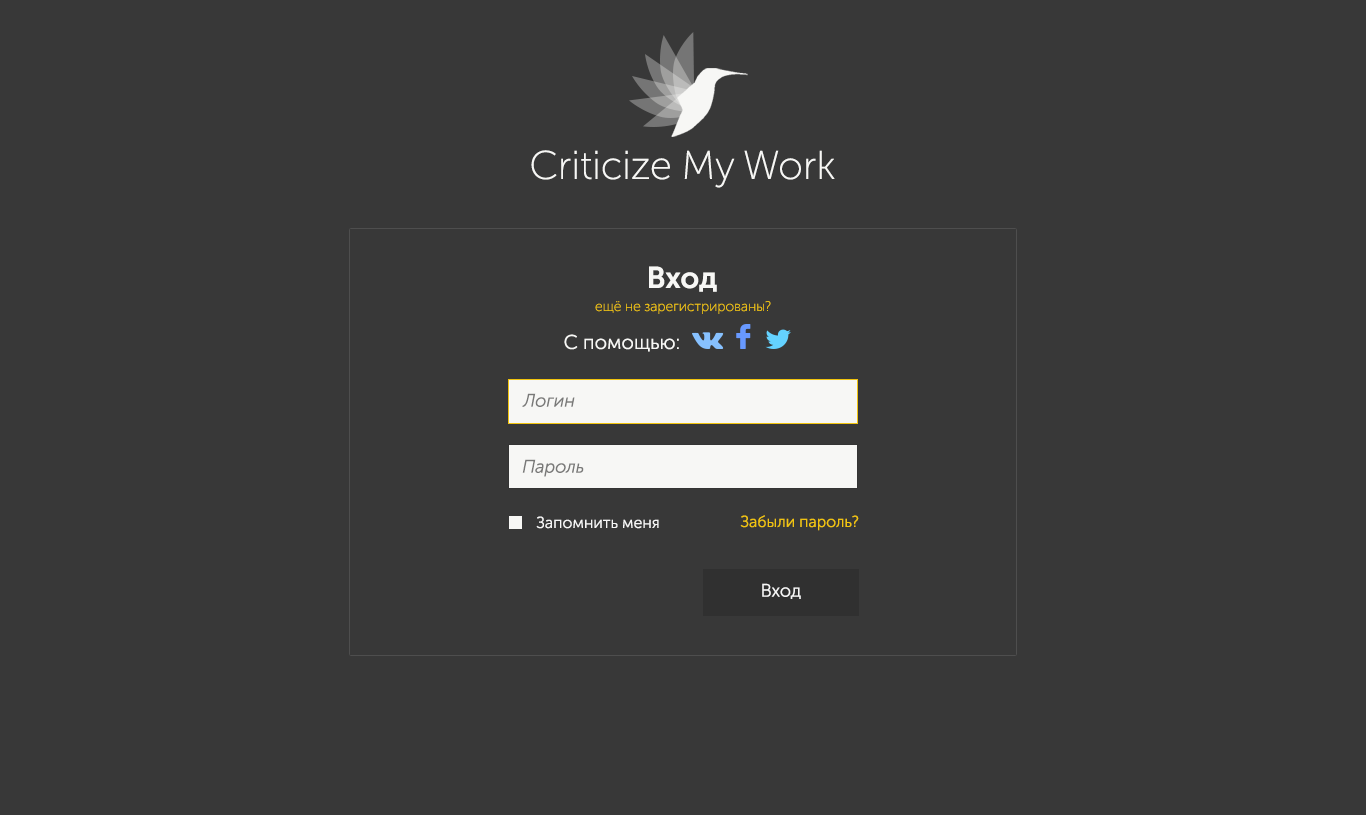
<style>
.page{position:relative;width:1366px;height:815px;background:#383838}
.page>*{position:absolute;margin:0}
.t1{font:40px "MuseoSansCyrl-100";color:#f7f7f5}
.t2{font:30px "MuseoSansCyrl-700";color:#f7f7f5}
.t3{font:14px "MuseoSansCyrl-100";color:#f1c40f}
.t4{font:20px "MuseoSansCyrl-300";color:#f7f7f5}
.t5{font:18px "MuseoSansCyrl-300Italic";color:#797978}
.t6{font:16px "MuseoSansCyrl-300";color:#f6f6f6}
.t7{font:16px "MuseoSansCyrl-300";color:#f1c40f}
.t8{font:18px "MuseoSansCyrl-300";color:#f6f6f6}
</style>
<div class="page">
<p class="t1" style="left:531px;top:150px;width:304px;height:38px">Criticize My Work</p>
<p class="t2" style="left:649px;top:266px;width:68px;height:26px">Вход</p>
<p class="t3" style="left:595px;top:301px;width:176px;height:13px">ещё не зарегистрированы?</p>
<p class="t4" style="left:564px;top:334px;width:115px;height:18px">С помощью:</p>
<p class="t5" style="left:522px;top:393px;width:53px;height:14px">Логин</p>
<p class="t5" style="left:522px;top:459px;width:62px;height:18px">Пароль</p>
<p class="t6" style="left:536px;top:516px;width:123px;height:13px">Запомнить меня</p>
<p class="t7" style="left:740px;top:515px;width:119px;height:16px">Забыли пароль?</p>
<p class="t8" style="left:762px;top:583px;width:39px;height:16px">Вход</p>
</div>
